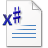
<style>
.page{position:relative;width:48px;height:48px;background:#ffffff}
.page>*{position:absolute;margin:0}
.t1{font:14.7px "SegoeUI-Bold"}
</style>
<div class="page">
<p class="t1" style="left:2px;top:14px;width:11px;height:11px">X</p>
</div>
